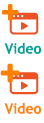
<style>
.page{position:relative;width:44px;height:123px;background:#ffffff}
.page>*{position:absolute;margin:0}
.t1{font:14px "TrebuchetMS";color:#00a69c;font-weight:bold}
.t2{font:14px "TrebuchetMS";color:#ff870f;font-weight:bold}
</style>
<div class="page">
<p class="t1" style="left:4px;top:42px;width:38px;height:12px">Video</p>
<p class="t2" style="left:4px;top:102px;width:38px;height:12px">Video</p>
</div>
